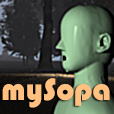
<style>
.page{position:relative;width:114px;height:114px}
.page>*{position:absolute;margin:0}
.t1{font:32px "Bauhaus93";color:#ffc080}
</style>
<div class="page">
<p class="t1" style="left:2px;top:78px;width:108px;height:30px">mySopa</p>
</div>
